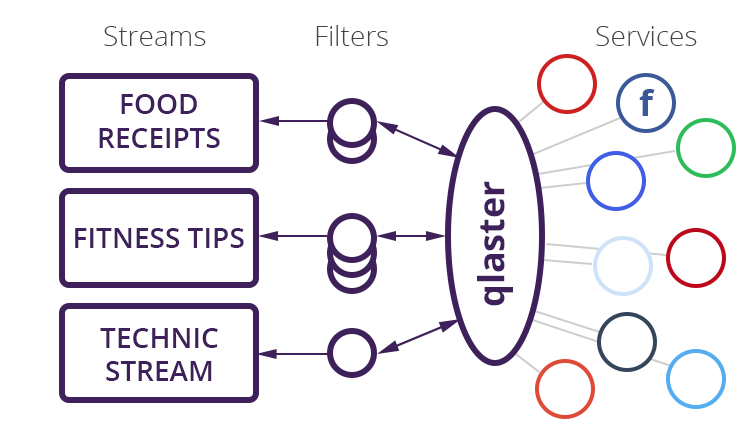
<style>
.page{position:relative;width:750px;height:438px;background:#ffffff}
.page>*{position:absolute;margin:0}
.t1{font:28px "OpenSans-Light";color:#444444}
.t2{font:36px "OpenSans-Bold";color:#3b5998}
.t3{font:28px "OpenSans-Semibold";color:#3e215a}
.t4{font:36px "OpenSans-Bold";color:#3e215a}
</style>
<div class="page">
<p class="t1" style="left:104px;top:26px;width:102px;height:20px">Streams</p>
<p class="t1" style="left:316px;top:25px;width:72px;height:21px">Filters</p>
<p class="t1" style="left:596px;top:26px;width:101px;height:20px">Services</p>
<p class="t2" style="left:639px;top:89px;width:16px;height:27px">f</p>
<p class="t3" style="left:99px;top:94px;width:121px;height:54px;text-align:center">FOOD RECEIPTS</p>
<p class="t4" style="left:477px;top:181px;width:36px;height:125px;rotate:-90deg">qlaster</p>
<p class="t3" style="left:75px;top:228px;width:169px;height:20px">FITNESS TIPS</p>
<p class="t3" style="left:100px;top:328px;width:118px;height:53px;text-align:center">TECHNIC<br>STREAM</p>
</div>
